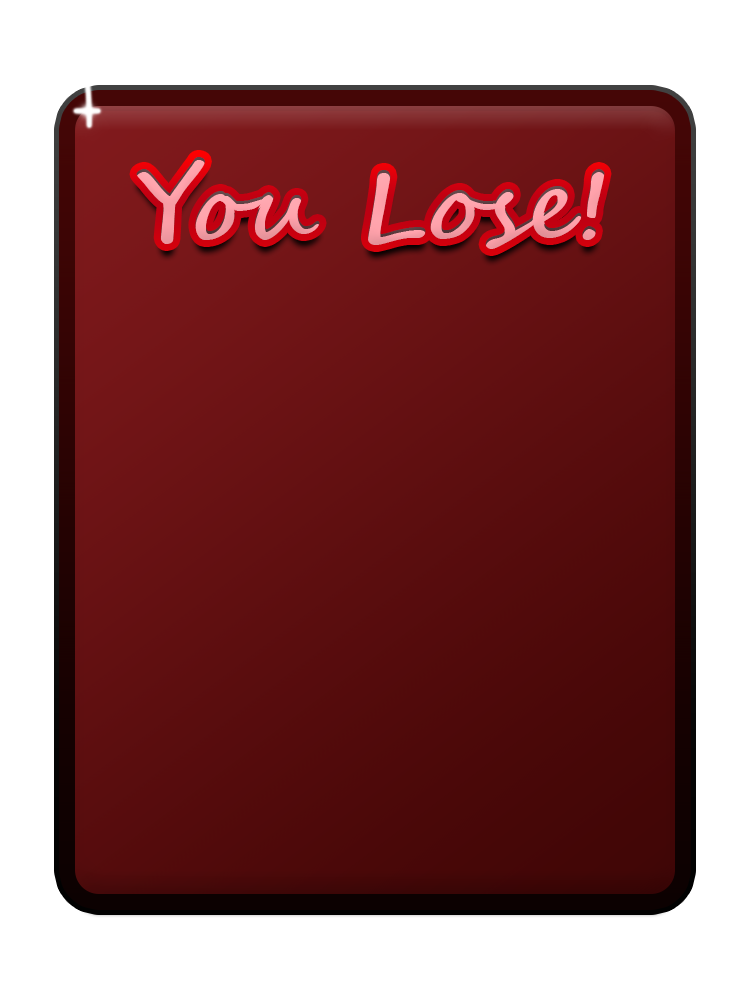
<style>
.page{position:relative;width:750px;height:1000px;background:#ffffff}
.page>*{position:absolute;margin:0}
.t1{font:100px "SegoeScript-Bold";color:#ffa2ab}
</style>
<div class="page">
<p class="t1" style="left:136px;top:157px;width:469px;height:92px">You Lose!</p>
</div>
